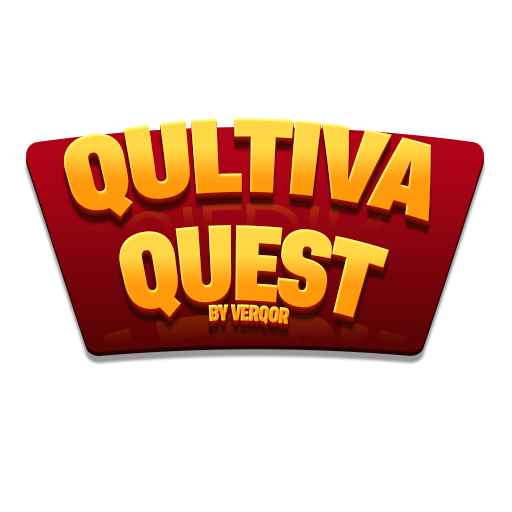
<style>
.page{position:relative;width:512px;height:512px;background:#ffffff}
.page>*{position:absolute;margin:0}
.t1{font:98.8px "AsketCondensed-ExtraBold";letter-spacing:-0.05em;text-transform:uppercase}
.t2{font:20px "AsketCondensed-ExtraBold";letter-spacing:-0.05em;text-transform:uppercase;scale:0.83 1}
.t3{font:100px "AsketCondensed-ExtraBold";letter-spacing:-0.05em;text-transform:uppercase;scale:0.83 1}
</style>
<div class="page">
<p class="t1" style="left:64px;top:118px;width:367px;height:104px">Qultiva</p>
<p class="t2" style="left:119px;top:225px;width:270px;height:100px"><span class="t3">  Quest<br></span>                                     by verqor</p>
</div>
